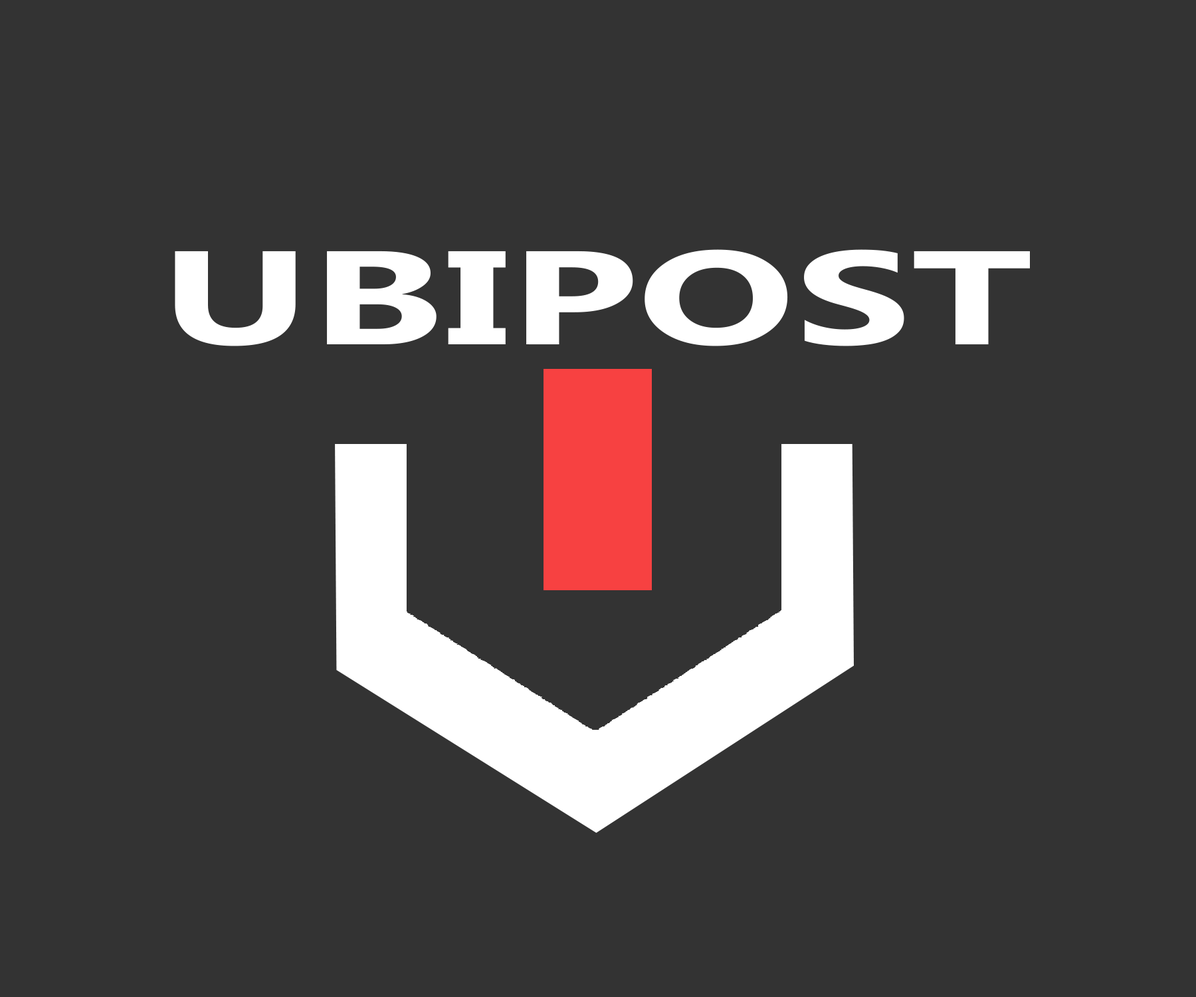
<style>
.page{position:relative;width:1196px;height:997px;background:#333333}
.page>*{position:absolute;margin:0}
.t1{font:132.9px "MicrosoftPhagsPa-Bold";color:#ffffff;scale:1.56 1}
</style>
<div class="page">
<p class="t1" style="left:175px;top:249px;width:855px;height:97px">UBIPOST</p>
</div>
